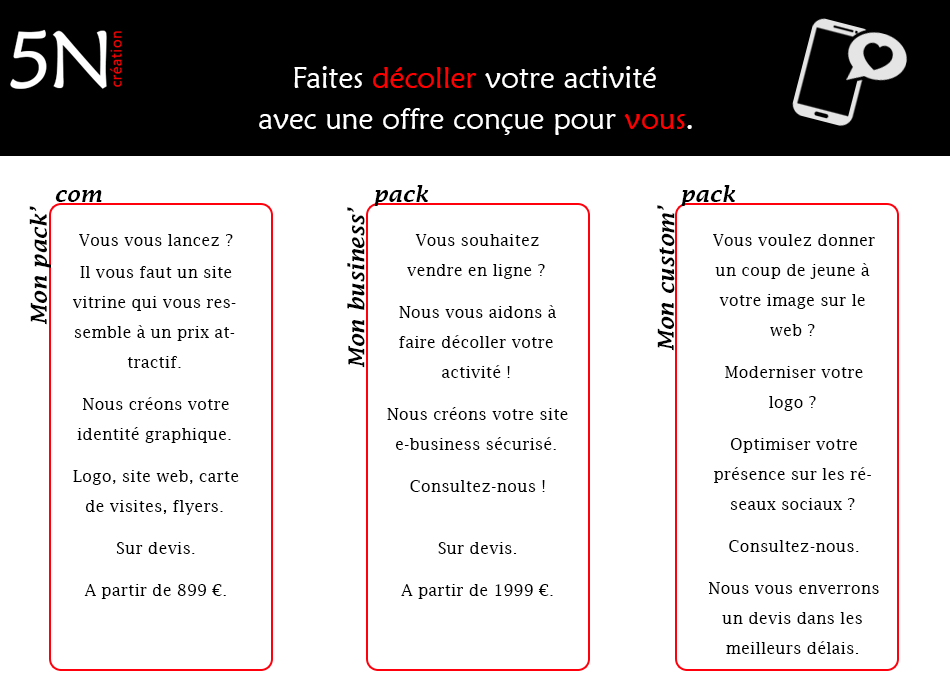
<style>
.page{position:relative;width:950px;height:700px;background:#ffffff}
.page>*{position:absolute;margin:0}
.t1{font:30px "MaiandraGD-Regular";color:#ffffff}
.t2{font:30px "MaiandraGD-Regular";color:#ff0000}
.t3{font:22px "LucidaFax-DemiItalic";color:#000000}
.t4{font:16px/30px "LucidaFax";color:#000000}
.t5{font:16px/20px "LucidaFax";color:#000000}
.t6{font:16px/50px "LucidaFax";color:#000000}
</style>
<div class="page">
<p class="t1" style="left:294px;top:66px;width:362px;height:22px">Faites <span class="t2">décoller </span>votre activité</p>
<p class="t1" style="left:259px;top:108px;width:433px;height:27px">avec une offre conçue pour <span class="t2">vous</span>.</p>
<p class="t3" style="left:374px;top:185px;width:55px;height:21px">pack</p>
<p class="t3" style="left:681px;top:185px;width:55px;height:21px">pack</p>
<p class="t3" style="left:55px;top:190px;width:47px;height:12px">com</p>
<p class="t3" style="left:29px;top:206px;width:22px;height:119px;rotate:-90deg">Mon pack’</p>
<p class="t3" style="left:347px;top:207px;width:18px;height:161px;rotate:-90deg">Mon business’</p>
<p class="t3" style="left:657px;top:205px;width:18px;height:146px;rotate:-90deg">Mon custom’</p>
<p class="t4" style="left:72px;top:234px;width:167px;height:365px;text-align:center"><span class="t5"><br>Vous vous lancez ? <br>Il vous faut un site </span>vitrine qui vous ressemble à un prix attractif.<br>Nous créons votre identité graphique.<br>Logo, site web, carte de visites, flyers. <br>Sur devis.<br>A partir de 899 €.</p>
<p class="t4" style="left:387px;top:234px;width:181px;height:365px;text-align:center">Vous souhaitez vendre en ligne ?<br>Nous vous aidons à faire décoller votre activité !<br>Nous créons votre site e-business sécurisé.<br>Consultez-nous !<br><span class="t6">Sur devis.<br></span>A partir de 1999 €.</p>
<p class="t4" style="left:708px;top:234px;width:171px;height:420px;text-align:center">Vous voulez donner un coup de jeune à votre image sur le web ? <br>Moderniser votre logo ? <br>Optimiser votre présence sur les réseaux sociaux ? <br>Consultez-nous.<br>Nous vous enverrons un devis dans les meilleurs délais.</p>
</div>
